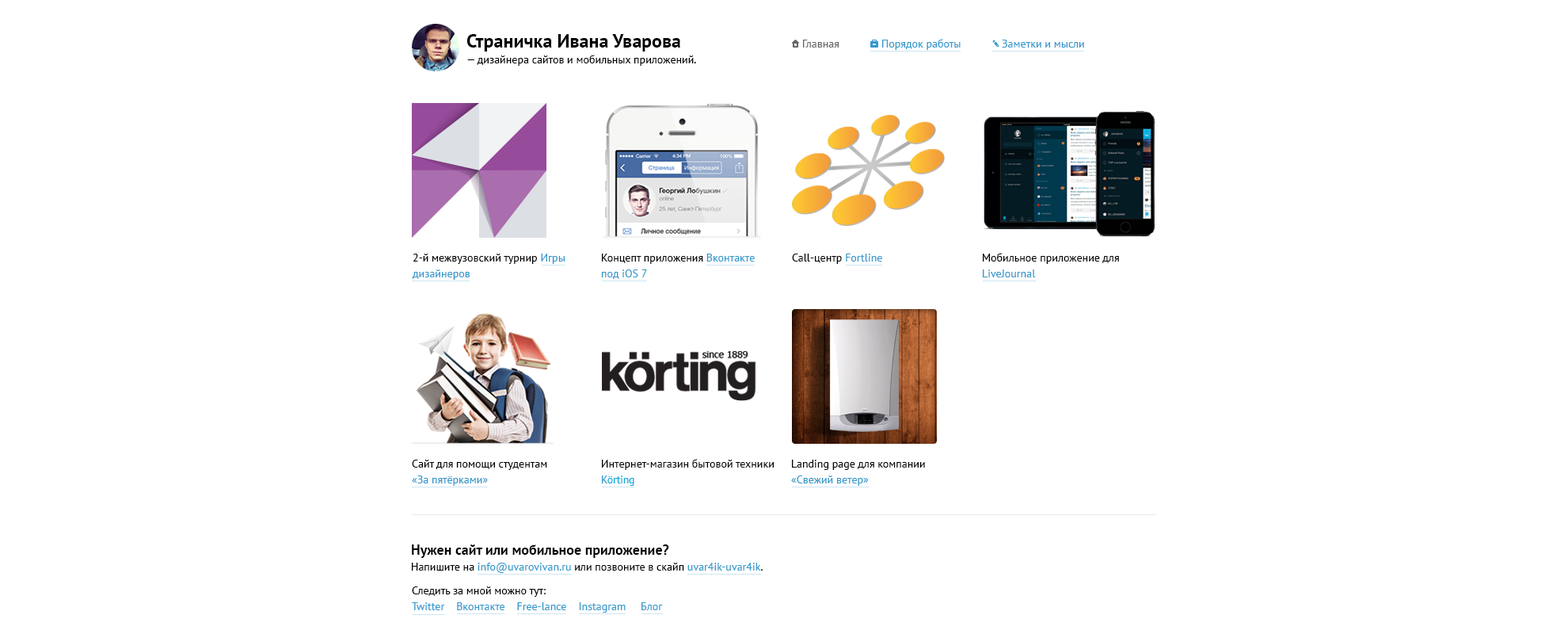
<style>
.page{position:relative;width:1568px;height:634px;background:#ffffff}
.page>*{position:absolute;margin:0}
.t1{font:11.1px/41.2px "PTSans-Regular";color:#010101}
.t2{font:19px/41.2px "PTSans-Bold";color:#000000}
.t3{font:11.1px "PTSans-Regular";color:#666666}
.t4{font:11.1px "PTSans-Regular";color:#3399cc}
.t5{font:11.1px/41.2px "PTSans-Regular";color:#000000}
.t6{font:11.1px/41.2px "PTSans-Regular";color:#3399cc}
.t7{font:11.1px "PTSans-Regular";color:#000000}
.t8{font:11.1px "PTSans-Regular";letter-spacing:-0.025em;color:#02abdd}
.t9{font:14.3px "PTSans-Bold";color:#000000}
</style>
<div class="page">
<p class="t1" style="left:466px;top:34px;width:230px;height:32px"><span class="t2">Страничка Ивана Уварова<br></span>— дизайнера сайтов и мобильных приложений.</p>
<p class="t3" style="left:803px;top:40px;width:36px;height:8px">Главная</p>
<p class="t4" style="left:882px;top:39px;width:79px;height:11px">Порядок работы</p>
<p class="t4" style="left:1002px;top:40px;width:82px;height:8px">Заметки и мысли</p>
<p class="t5" style="left:412px;top:253px;width:153px;height:27px">2-й межвузовский турнир<span class="t6"> Игры<br>дизайнеров</span></p>
<p class="t6" style="left:601px;top:253px;width:154px;height:26px"><span class="t5">Концепт приложения</span> Вконтакте<br>под iOS 7</p>
<p class="t7" style="left:792px;top:253px;width:90px;height:11px">Call-центр <span class="t4">Fortline</span></p>
<p class="t5" style="left:983px;top:253px;width:136px;height:24px">Мобильное приложение для<br><span class="t6">LiveJournal</span></p>
<p class="t5" style="left:412px;top:459px;width:135px;height:26px">Сайт для помощи студентам<br><span class="t6">«За пятёрками»</span></p>
<p class="t5" style="left:602px;top:459px;width:172px;height:26px">Интернет-магазин бытовой техники<br><span class="t6">K</span><span class="t8">örting</span></p>
<p class="t5" style="left:791px;top:459px;width:134px;height:26px">Landing page для компании<br><span class="t6">«Свежий ветер»</span></p>
<p class="t9" style="left:412px;top:544px;width:351px;height:29px">Нужен сайт или мобильное приложение?<br><span class="t7">Напишите на</span><span class="t4"> info@uvarovivan.ru</span><span class="t7"> или позвоните в скайп </span><span class="t4">uvar4ik-uvar4ik</span><span class="t7">.</span></p>
<p class="t4" style="left:412px;top:586px;width:251px;height:26px"><span class="t7">Следить за мной можно тут:<br></span>Twitter    Вконтакте    Free-lance    Instagram     Блог</p>
</div>
